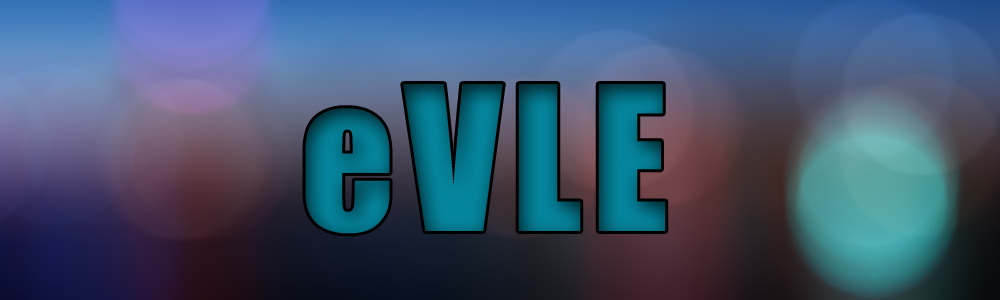
<style>
.page{position:relative;width:1000px;height:300px}
.page>*{position:absolute;margin:0}
.t1{font:186px "Impact";letter-spacing:0.05em;color:#037489}
</style>
<div class="page">
<p class="t1" style="left:305px;top:84px;width:361px;height:150px">eVLE</p>
</div>
